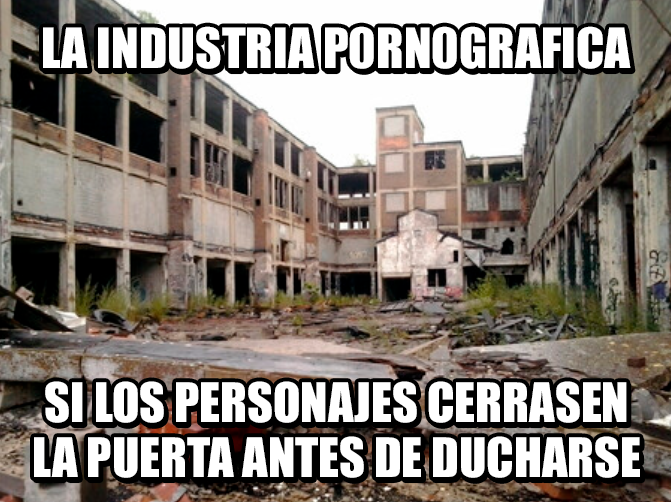
<style>
.page{position:relative;width:671px;height:502px}
.page>*{position:absolute;margin:0}
.t1{font:51.2px "Impact";color:#ffffff}
.t2{font:50.2px "Impact";color:#ffffff}
</style>
<div class="page">
<p class="t1" style="left:43px;top:26px;width:588px;height:43px">LA INDUSTRIA P0RN0GRAFICA</p>
<p class="t2" style="left:34px;top:381px;width:606px;height:97px;text-align:center">SI LOS PERSONAJES CERRASEN<br>LA PUERTA ANTES DE DUCHARSE</p>
</div>
